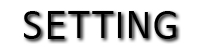
<style>
.page{position:relative;width:200px;height:50px;background:#ffffff}
.page>*{position:absolute;margin:0}
.t1{font:35.4px "NanumBarunGothic";letter-spacing:0.05em;color:#000000}
</style>
<div class="page">
<p class="t1" style="left:24px;top:11px;width:152px;height:28px">SETTING</p>
</div>
